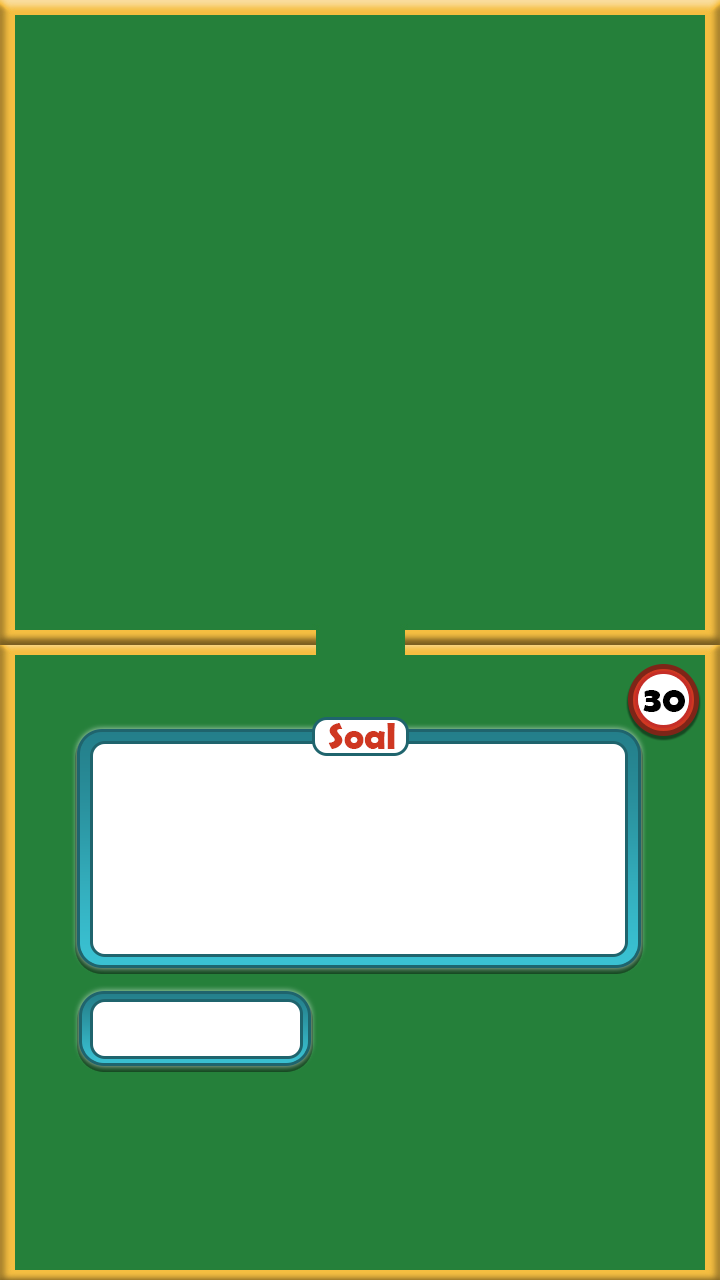
<style>
.page{position:relative;width:720px;height:1280px;background:#25803a}
.page>*{position:absolute;margin:0}
.t1{font:37.5px "BerlinSansFBDemi-Bold";color:#000000}
.t2{font:37.5px "BerlinSansFBDemi-Bold";color:#cf3721}
</style>
<div class="page">
<p class="t1" style="left:643px;top:690px;width:42px;height:22px">30</p>
<p class="t2" style="left:328px;top:723px;width:67px;height:26px">Soal</p>
</div>
